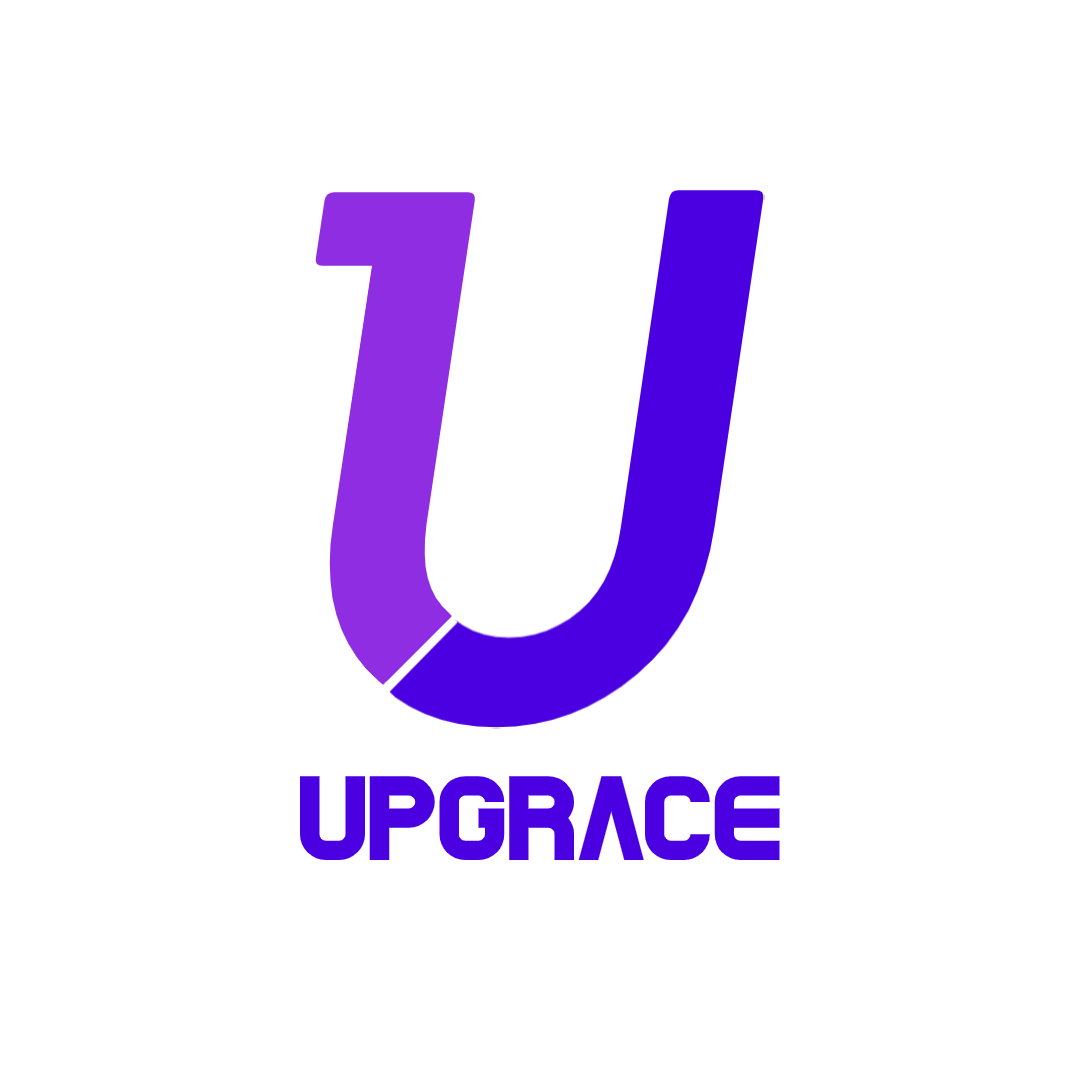
<style>
.page{position:relative;width:1080px;height:1080px;background:#ffffff}
.page>*{position:absolute;margin:0}
.t1{font:119.8px "Regular";color:#4a00e0}
</style>
<div class="page">
<p class="t1" style="left:300px;top:776px;width:480px;height:84px">UPGRACE</p>
</div>
